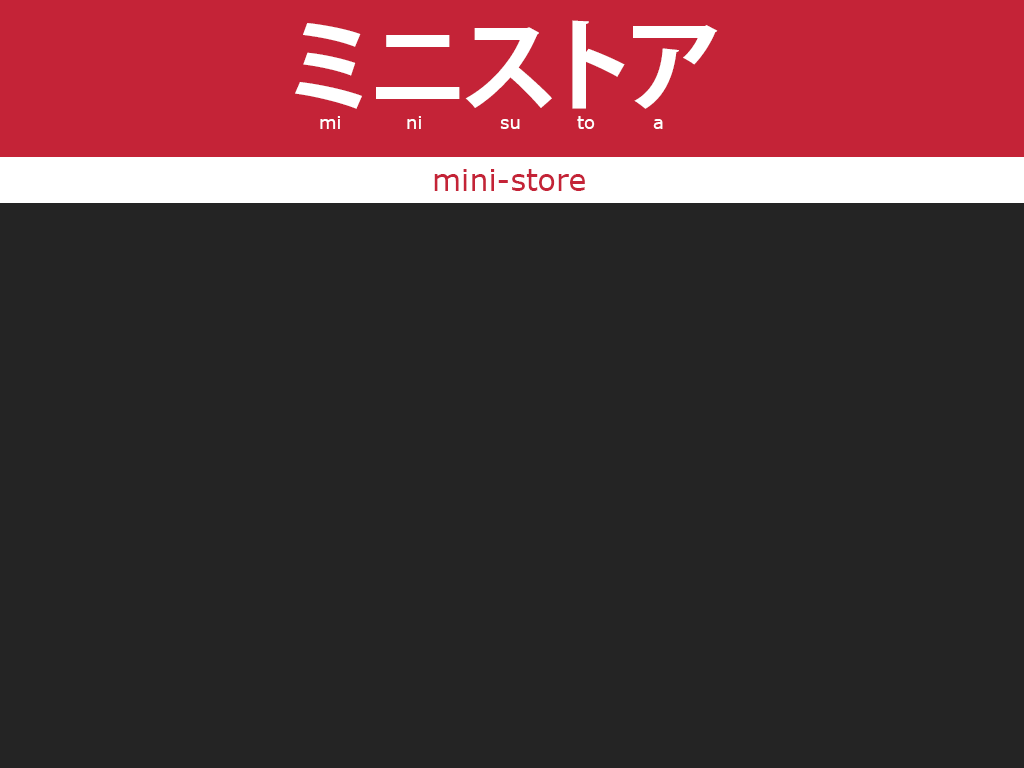
<style>
.page{position:relative;width:1024px;height:768px;background:#242424}
.page>*{position:absolute;margin:0}
.t1{font:100px "KozGoPr6N-Bold";color:#ffffff}
.t2{font:18px "Verdana";color:#ffffff}
.t3{font:30px "Verdana";color:#c42337}
</style>
<div class="page">
<p class="t1" style="left:295px;top:20px;width:423px;height:89px">ミニストア</p>
<p class="t2" style="left:320px;top:116px;width:20px;height:13px">mi</p>
<p class="t2" style="left:407px;top:116px;width:14px;height:13px">ni</p>
<p class="t2" style="left:500px;top:119px;width:20px;height:10px">su</p>
<p class="t2" style="left:577px;top:116px;width:18px;height:13px">to</p>
<p class="t2" style="left:653px;top:119px;width:10px;height:10px">a</p>
<p class="t3" style="left:434px;top:169px;width:151px;height:22px">mini-store</p>
</div>
